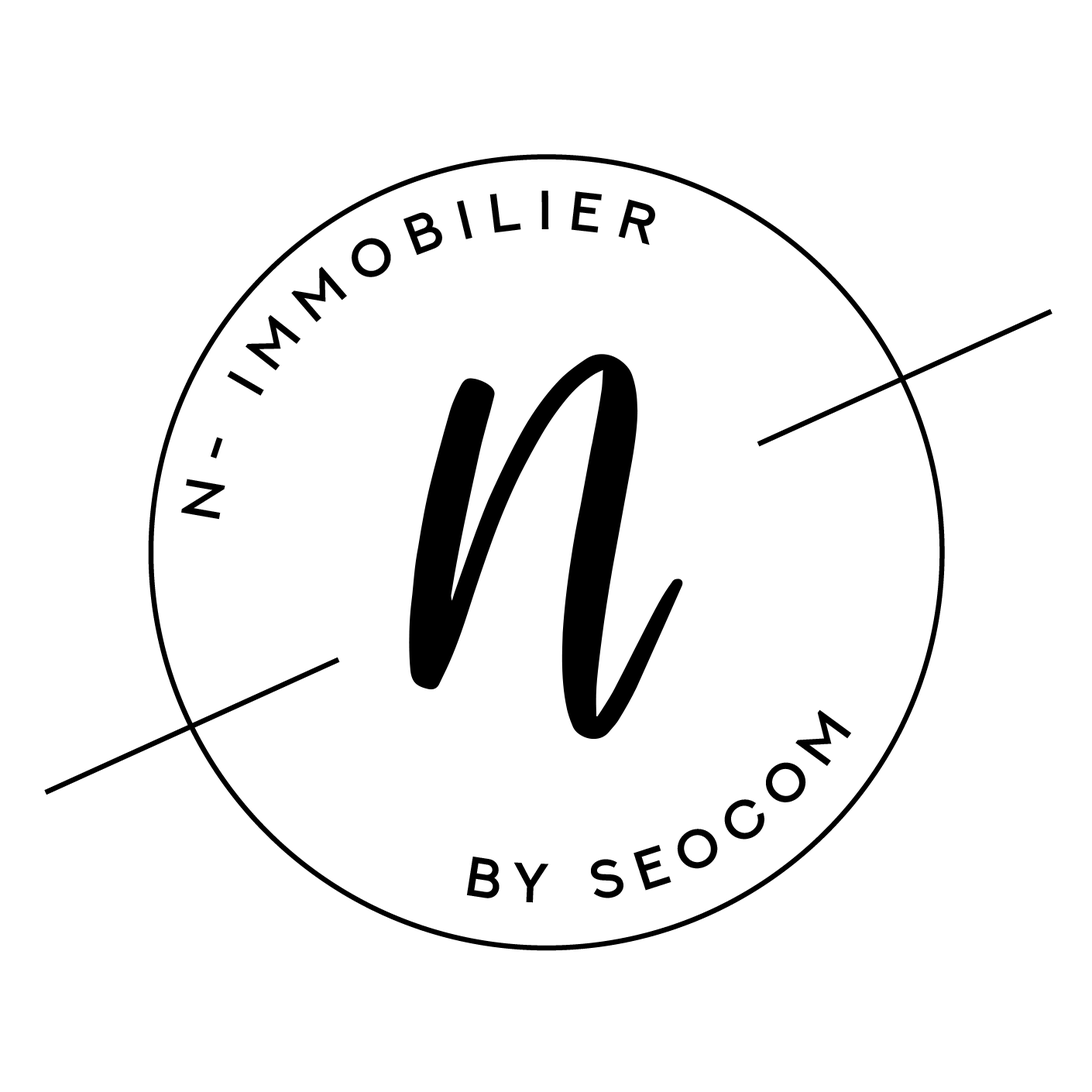
<style>
.page{position:relative;width:1092px;height:1092px;background:#ffffff}
.page>*{position:absolute;margin:0}
.t1{font:54.9px "NEXTART-SemiBold";letter-spacing:0.283em;color:#000000}
.t2{font:450.7px "raustila-Regular";color:#000000}
.t3{font:55.8px "NEXTART-SemiBold";letter-spacing:0.283em;color:#000000}
</style>
<div class="page">
<p class="t1" style="left:181px;top:191px;width:474px;height:329px;rotate:22deg">N- Immobilier</p>
<p class="t2" style="left:409px;top:354px;width:274px;height:386px">N</p>
<p class="t3" style="left:466px;top:709px;width:385px;height:194px">BY SEOCOM</p>
</div>
